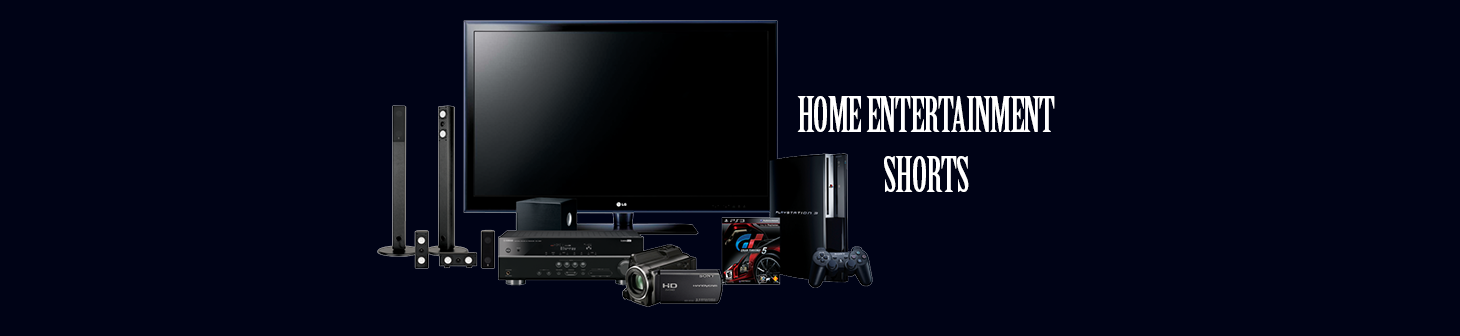
<style>
.page{position:relative;width:1460px;height:336px;background:#000316}
.page>*{position:absolute;margin:0}
.t1{font:48px/60px "BirchStd";letter-spacing:-0.025em;color:#ffffff}
</style>
<div class="page">
<p class="t1" style="left:797px;top:96px;width:258px;height:96px;text-align:center">HOME ENTERTAINMENT<br>SHORTS</p>
</div>
